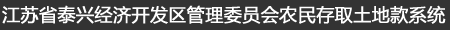
<style>
.page{position:relative;width:450px;height:30px;background:#333333}
.page>*{position:absolute;margin:0}
.t1{font:18px "MicrosoftYaHei";color:#ffffff;font-weight:bold}
</style>
<div class="page">
<p class="t1" style="left:2px;top:5px;width:444px;height:19px">江苏省泰兴经济开发区管理委员会农民存取土地款系统</p>
</div>
